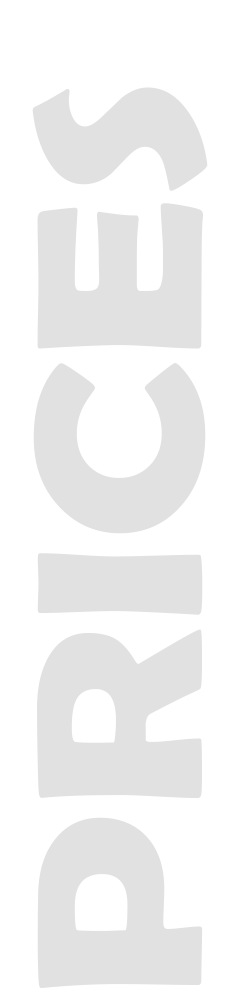
<style>
.page{position:relative;width:250px;height:1000px;background:#ffffff}
.page>*{position:absolute;margin:0}
.t1{font:238.8px "BerlinSansFBDemi-Bold";color:#e1e1e1;scale:1.21 1}
</style>
<div class="page">
<p class="t1" style="left:32px;top:87px;width:176px;height:901px;rotate:-90deg">PRICES</p>
</div>
